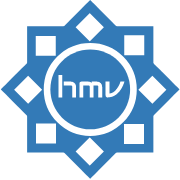
<style>
.page{position:relative;width:180px;height:180px;background:#ffffff}
.page>*{position:absolute;margin:0}
.t1{font:29.9px "Audiowide-Regular";color:#ffffff}
</style>
<div class="page">
<p class="t1" style="left:58px;top:75px;width:67px;height:23px">hmv</p>
</div>
